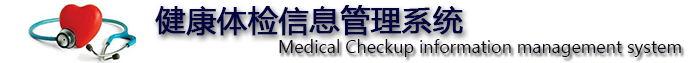
<style>
.page{position:relative;width:698px;height:63px;background:#ffffff}
.page>*{position:absolute;margin:0}
.t1{font:30px "MicrosoftYaHei";color:#030540;font-weight:bold}
.t2{font:18px "LaoUI";color:#080813}
</style>
<div class="page">
<p class="t1" style="left:155px;top:5px;width:308px;height:31px">健康体检信息管理系统</p>
<p class="t2" style="left:279px;top:39px;width:402px;height:18px">Medical Checkup information management system</p>
</div>
